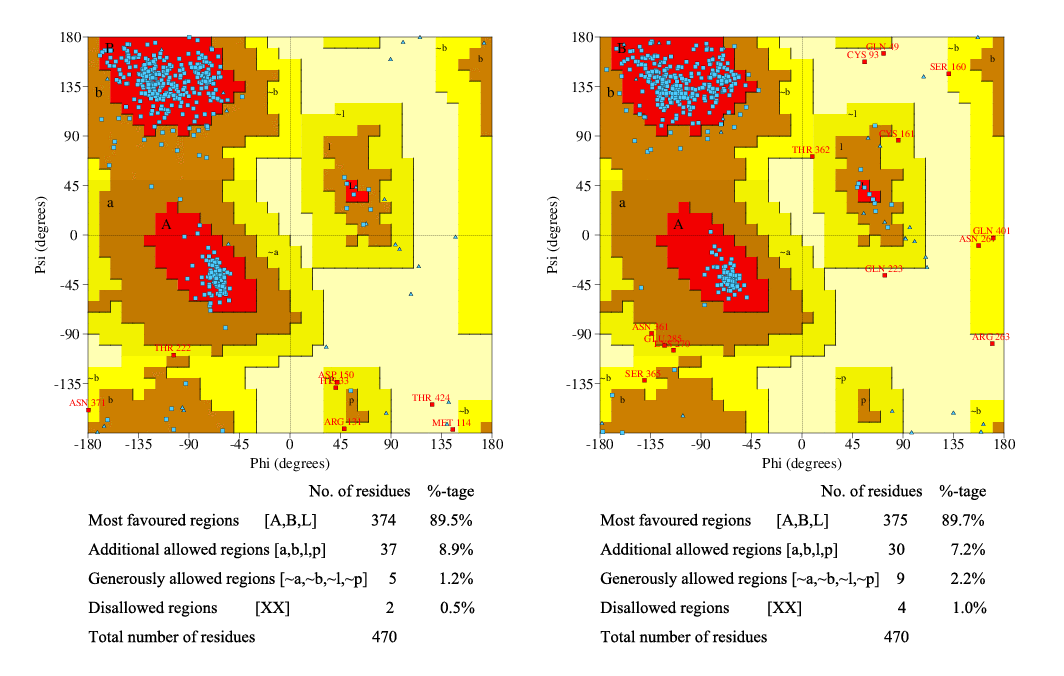
<style>
.page{position:relative;width:1064px;height:676px;background:#ffffff}
.page>*{position:absolute;margin:0}
.t1{font:16.7px "TimesNewRomanPSMT";color:#000000}
</style>
<div class="page">
<p class="t1" style="left:88px;top:484px;width:387px;height:159px">No. of residues    %-tage<br>Most favoured regions      [A,B,L]             374        89.5%  <br>Additional allowed regions [a,b,l,p]             37          8.9%          <br>Generously allowed regions [~a,~b,~l,~p]     5          1.2%          <br>Disallowed regions         [XX]                       2           0.5%  <br>Total number of residues                            470</p>
<p class="t1" style="left:600px;top:484px;width:387px;height:159px">No. of residues    %-tage<br>Most favoured regions      [A,B,L]             375        89.7%  <br>Additional allowed regions [a,b,l,p]            30           7.2%           <br>Generously allowed regions [~a,~b,~l,~p]    9           2.2%          <br>Disallowed regions         [XX]                       4           1.0%  <br>Total number of residues                            470</p>
</div>
